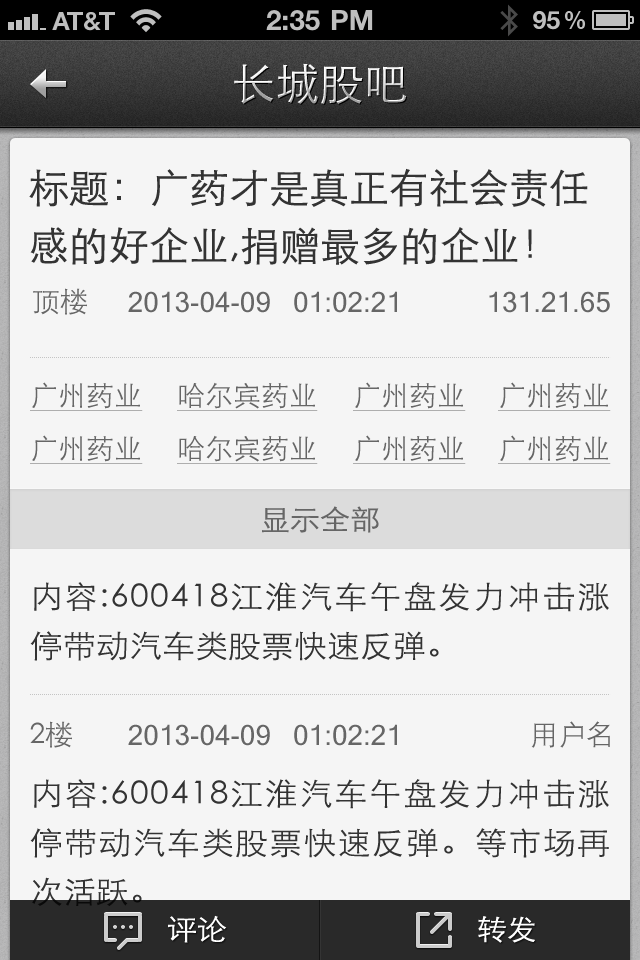
<style>
.page{position:relative;width:640px;height:960px;background:#f5f5f5}
.page>*{position:absolute;margin:0}
.t1{font:44px "STXihei";letter-spacing:0.005em}
.t2{font:40px/58px "STXihei";color:#333333}
.t3{font:28px "STXihei";color:#666666}
.t4{font:28px "MicrosoftSansSerif";color:#666666}
.t5{font:28px "STXihei";color:#666666;text-decoration:underline}
.t6{font:28.5px "STXihei";color:#666666;scale:1.05 1}
.t7{font:31.3px/49px "STXihei";color:#333333;scale:1.05 1}
.t8{font:28.5px "STXihei";color:#ffffff;scale:1.05 1}
</style>
<div class="page">
<p class="t1" style="left:234px;top:63px;width:172px;height:42px">长城股吧</p>
<p class="t2" style="left:29px;top:168px;width:559px;height:97px">标题：广药才是真正有社会责任<br>感的好企业,捐赠最多的企业！</p>
<p class="t3" style="left:33px;top:288px;width:54px;height:27px">顶楼</p>
<p class="t4" style="left:128px;top:291px;width:142px;height:22px">2013-04-09</p>
<p class="t4" style="left:294px;top:291px;width:103px;height:22px">01:02:21</p>
<p class="t4" style="left:489px;top:291px;width:121px;height:22px">131.21.65</p>
<p class="t5" style="left:30px;top:382px;width:113px;height:29px">广州药业</p>
<p class="t5" style="left:177px;top:382px;width:141px;height:29px">哈尔宾药业</p>
<p class="t5" style="left:353px;top:382px;width:113px;height:29px">广州药业</p>
<p class="t5" style="left:498px;top:382px;width:113px;height:29px">广州药业</p>
<p class="t5" style="left:30px;top:435px;width:113px;height:29px">广州药业</p>
<p class="t5" style="left:177px;top:435px;width:141px;height:29px">哈尔宾药业</p>
<p class="t5" style="left:353px;top:435px;width:113px;height:29px">广州药业</p>
<p class="t5" style="left:498px;top:435px;width:113px;height:29px">广州药业</p>
<p class="t6" style="left:262px;top:506px;width:117px;height:27px">显示全部</p>
<p class="t7" style="left:30px;top:582px;width:579px;height:79px;text-align:justify">内容:600418江淮汽车午盘发力冲击涨停带动汽车类股票快速反弹。</p>
<p class="t3" style="left:30px;top:721px;width:42px;height:27px">2楼</p>
<p class="t4" style="left:128px;top:724px;width:142px;height:22px">2013-04-09</p>
<p class="t4" style="left:294px;top:724px;width:103px;height:22px">01:02:21</p>
<p class="t3" style="left:531px;top:721px;width:79px;height:27px">用户名</p>
<p class="t7" style="left:30px;top:779px;width:579px;height:127px;text-align:justify">内容:600418江淮汽车午盘发力冲击涨停带动汽车类股票快速反弹。等市场再次活跃。</p>
<p class="t8" style="left:168px;top:915px;width:59px;height:28px">评论</p>
<p class="t8" style="left:478px;top:916px;width:57px;height:27px">转发</p>
</div>
